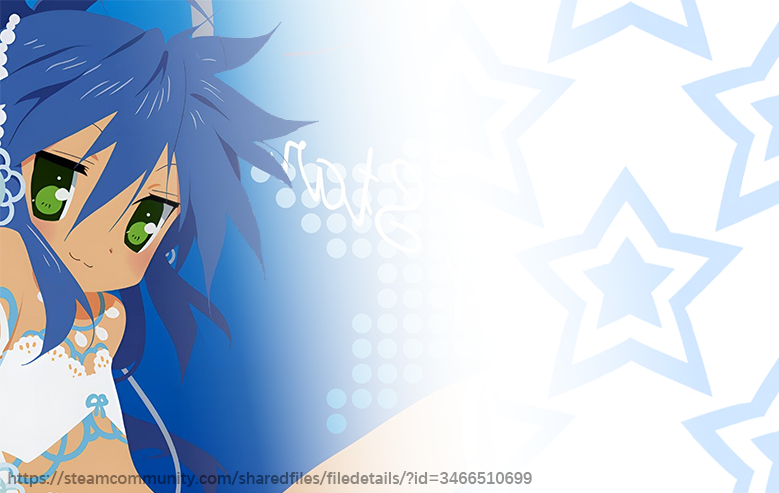
<style>
.page{position:relative;width:779px;height:493px;background:#ffffff}
.page>*{position:absolute;margin:0}
.t1{font:16.7px "DengXian-Bold"}
</style>
<div class="page">
<p class="t1" style="left:8px;top:471px;width:524px;height:16px">https://steamcommunity.com/sharedfiles/filedetails/?id=3466510699</p>
</div>
